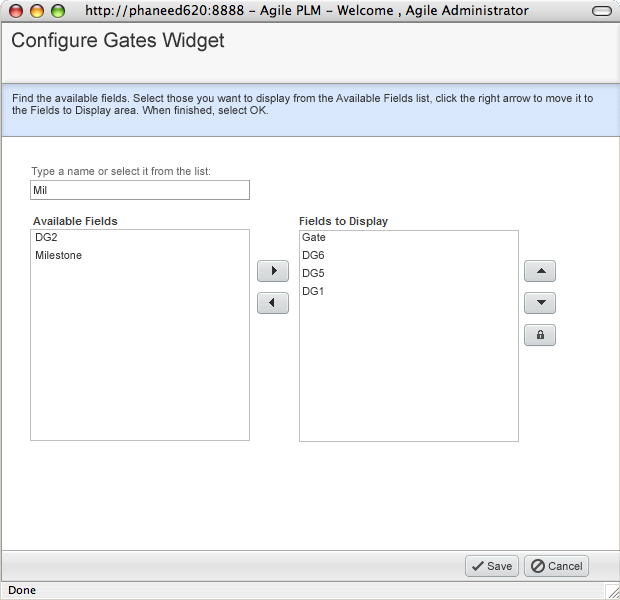
<style>
.page{position:relative;width:620px;height:600px;background:#ffffff}
.page>*{position:absolute;margin:0}
.t1{font:20px "ArialMT";color:#333333}
.t2{font:11px/12px "ArialMT";color:#333333}
.t3{font:11px "ArialMT";color:#666666}
.t4{font:11px "ArialMT";color:#333333}
.t5{font:11px/18px "ArialMT";color:#333333}
</style>
<div class="page">
<p class="t1" style="left:12px;top:32px;width:213px;height:20px">Configure Gates Widget</p>
<p class="t2" style="left:12px;top:94px;width:581px;height:23px">Find the available fields. Select those you want to display from the Available Fields list, click the right arrow to move it to <br>the Fields to Display area. When finished, select OK.</p>
<p class="t3" style="left:31px;top:167px;width:179px;height:11px">Type a name or select it from the list:</p>
<p class="t4" style="left:34px;top:186px;width:13px;height:8px">Mil</p>
<p class="t5" style="left:36px;top:233px;width:46px;height:26px">DG2<br>Milestone</p>
<p class="t5" style="left:302px;top:233px;width:24px;height:62px">Gate<br>DG6<br>DG5<br>DG1</p>
<p class="t4" style="left:487px;top:562px;width:25px;height:8px">Save</p>
<p class="t4" style="left:548px;top:562px;width:34px;height:8px">Cancel</p>
</div>
